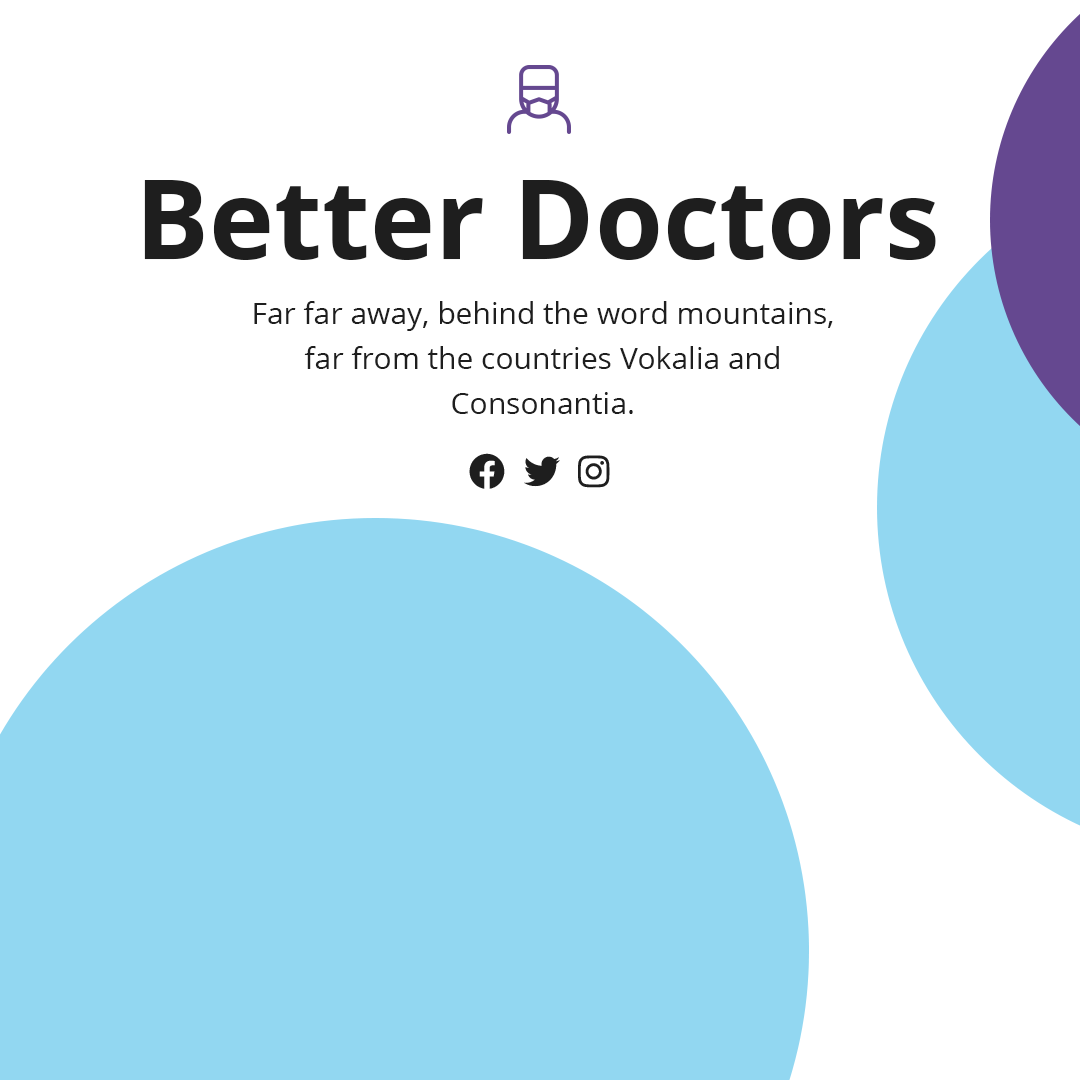
<style>
.page{position:relative;width:1080px;height:1080px;background:#ffffff}
.page>*{position:absolute;margin:0}
.t1{font:110px "OpenSans-Bold";color:#1e1e1e}
.t2{font:30px/45px "OpenSans";color:#1e1e1e}
</style>
<div class="page">
<p class="t1" style="left:144px;top:180px;width:792px;height:80px">Better Doctors</p>
<p class="t2" style="left:254px;top:301px;width:579px;height:113px;text-align:center">Far far away, behind the word mountains, far from the countries Vokalia and Consonantia.</p>
</div>
